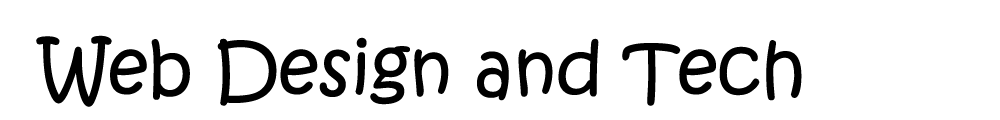
<style>
.page{position:relative;width:1000px;height:120px;background:#ffffff}
.page>*{position:absolute;margin:0}
.t1{font:72px "KristenITC-Regular";color:#000000}
</style>
<div class="page">
<p class="t1" style="left:36px;top:35px;width:766px;height:72px">Web Design and Tech</p>
</div>
